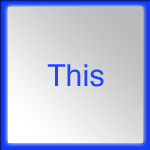
<style>
.page{position:relative;width:150px;height:150px}
.page>*{position:absolute;margin:0}
.t1{font:30px "Helvetica";color:#2148f4}
</style>
<div class="page">
<p class="t1" style="left:47px;top:64px;width:57px;height:23px">This</p>
</div>
